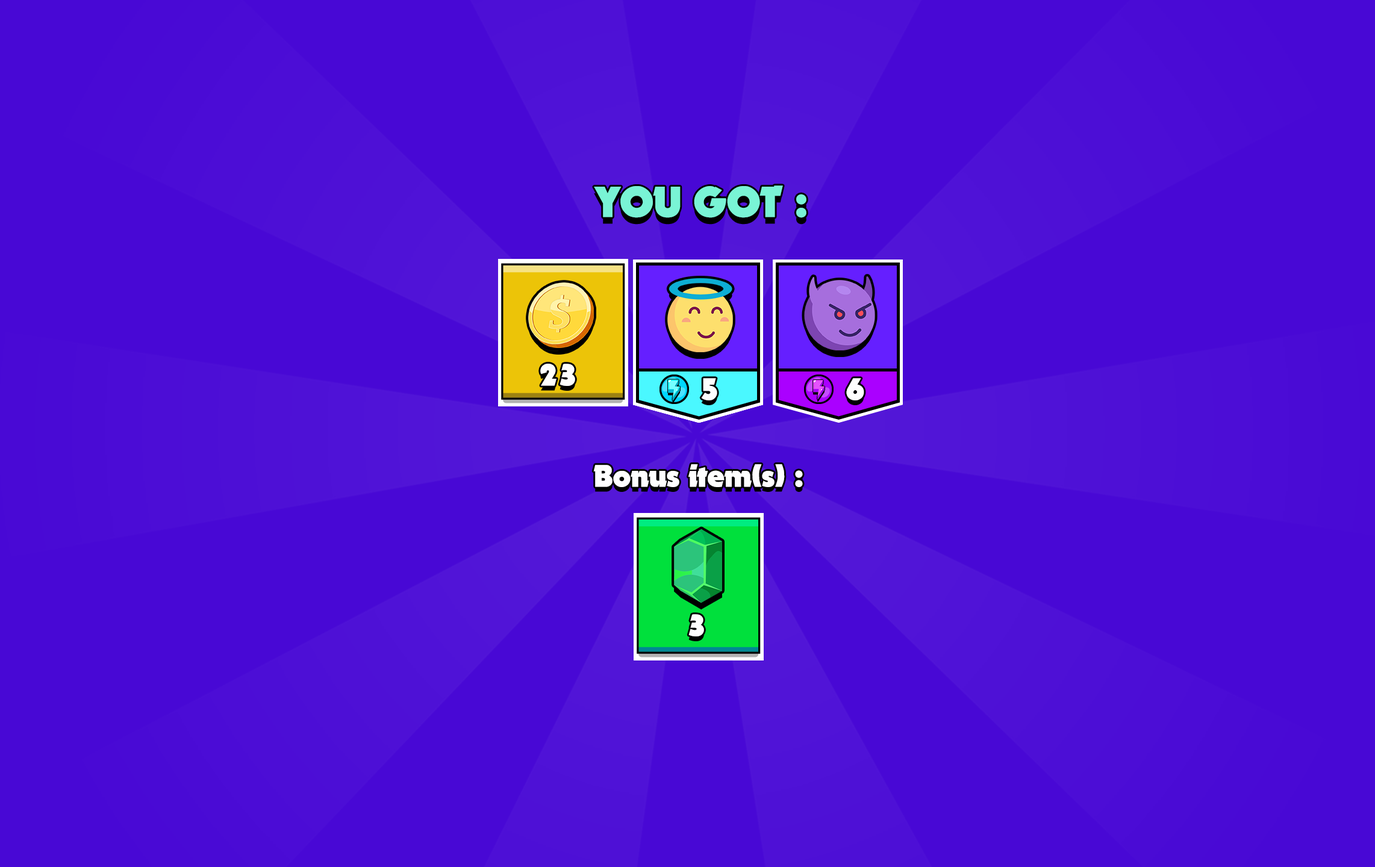
<style>
.page{position:relative;width:1375px;height:867px;background:#4808d5}
.page>*{position:absolute;margin:0}
.t1{font:42.2px "November";color:#79f4d5}
.t2{font:30.1px "November";color:#fefefe}
</style>
<div class="page">
<p class="t1" style="left:594px;top:185px;width:212px;height:33px">YOU GOT :</p>
<p class="t2" style="left:540px;top:364px;width:35px;height:22px">23</p>
<p class="t2" style="left:701px;top:378px;width:16px;height:23px">5</p>
<p class="t2" style="left:846px;top:378px;width:18px;height:23px">6</p>
<p class="t2" style="left:593px;top:464px;width:210px;height:23px">Bonus item(s) :</p>
<p class="t2" style="left:688px;top:614px;width:16px;height:23px">3</p>
</div>
